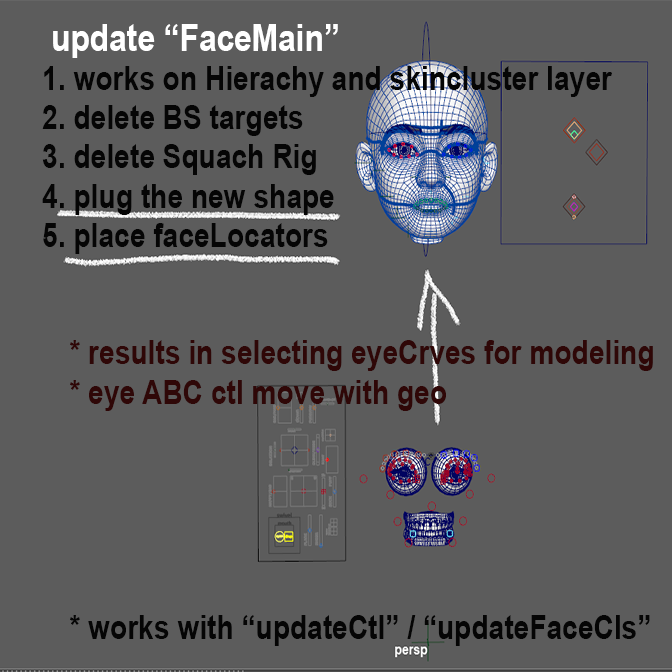
<style>
.page{position:relative;width:672px;height:672px;background:#5c5c5c}
.page>*{position:absolute;margin:0}
.t1{font:32.7px "Arial-BoldMT";color:#050505;scale:0.86 1}
.t2{font:36.8px "Arial-BoldMT";color:#ffffff;scale:0.86 1}
.t3{font:32.7px "Arial-BoldMT";color:#2f0707;scale:0.86 1}
</style>
<div class="page">
<p class="t1" style="left:42px;top:24px;width:611px;height:622px"><span class="t2"> update “FaceMain”<br></span>1. works on Hierachy and skincluster layer<br>2. delete BS targets<br>3. delete Squach Rig<br>4. plug the new shape<br>5. place faceLocators<br><br><br><span class="t3"> * results in selecting eyeCrves for modeling <br> * eye ABC ctl move with geo<br> </span><br><br><br><br><br> * works with “updateCtl” / “updateFaceCls”</p>
</div>
